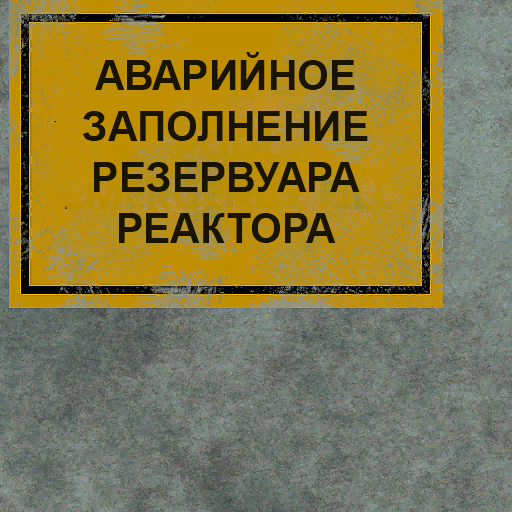
<style>
.page{position:relative;width:512px;height:512px}
.page>*{position:absolute;margin:0}
.t1{font:41px/51px "Arial-BoldMT";color:#181400;text-transform:uppercase}
</style>
<div class="page">
<p class="t1" style="left:83px;top:52px;width:285px;height:191px;text-align:center">Аварийное заполнение резервуара реактора</p>
</div>
